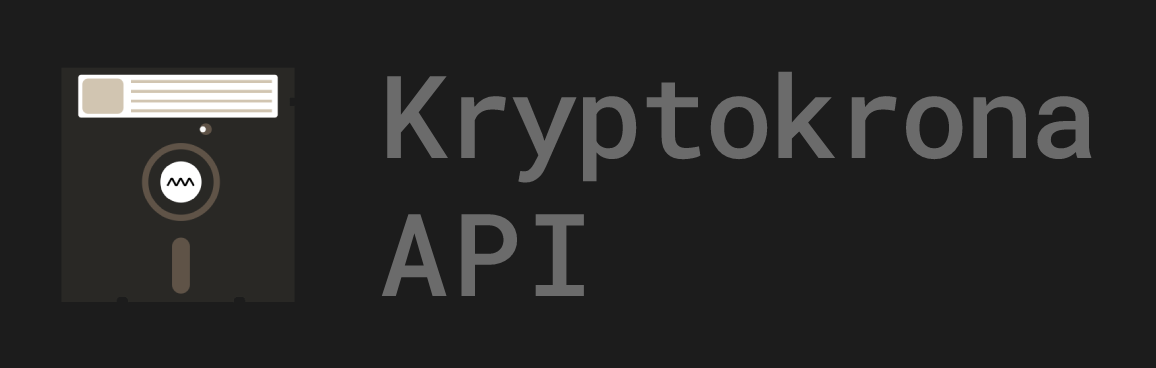
<style>
.page{position:relative;width:1156px;height:368px;background:#1c1c1c}
.page>*{position:absolute;margin:0}
.t1{font:115px "RobotoMono-Medium";letter-spacing:-0.034em;color:#6b6b6b}
.t2{font:115px "RobotoMono-Medium";letter-spacing:0.036em;color:#6b6b6b}
</style>
<div class="page">
<p class="t1" style="left:381px;top:71px;width:711px;height:225px">Kryptokrona<br><span class="t2">API</span></p>
</div>
